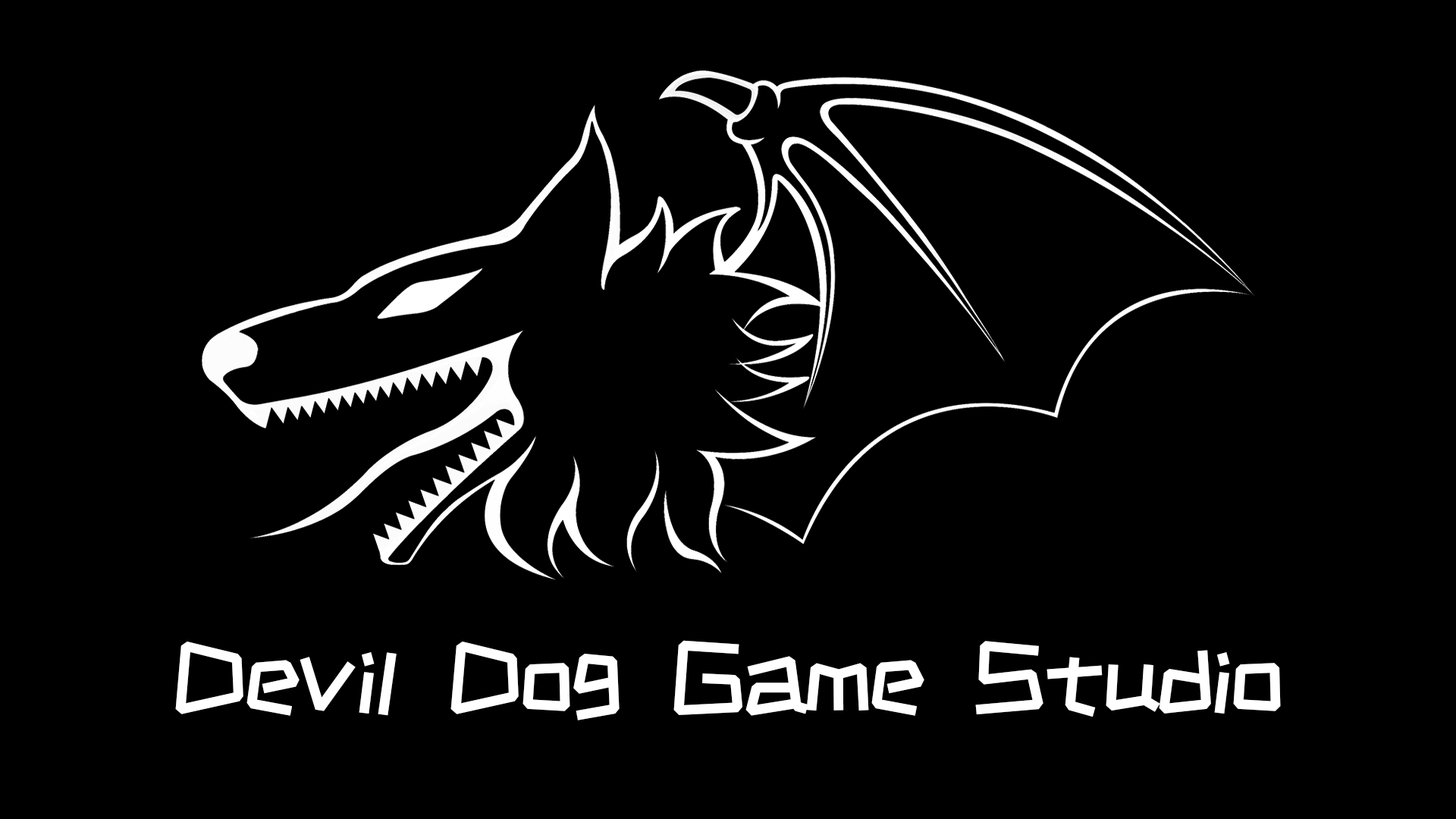
<style>
.page{position:relative;width:1456px;height:819px;background:#000000}
.page>*{position:absolute;margin:0}
.t1{font:101.5px "HappyZcool-2016";color:#ffffff}
</style>
<div class="page">
<p class="t1" style="left:175px;top:640px;width:1106px;height:80px">Devil Dog Game Studio</p>
</div>
